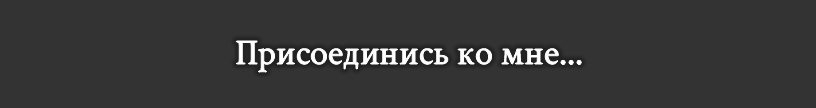
<style>
.page{position:relative;width:816px;height:108px;background:#333333}
.page>*{position:absolute;margin:0}
.t1{font:36px "CrimsonText-Regular";color:#ffffff}
</style>
<div class="page">
<p class="t1" style="left:236px;top:41px;width:346px;height:31px">Присоединись ко мне...</p>
</div>
